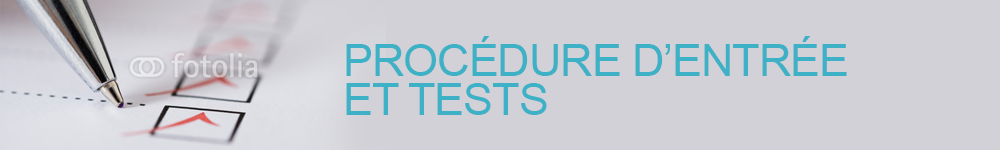
<style>
.page{position:relative;width:1000px;height:150px;background:#d2d1d7}
.page>*{position:absolute;margin:0}
.t1{font:45px/39px "ArialMT";letter-spacing:-0.025em;color:#3fb1c6;text-transform:uppercase}
</style>
<div class="page">
<p class="t1" style="left:346px;top:36px;width:501px;height:79px">Procédure d’entrée <br>et tests</p>
</div>
